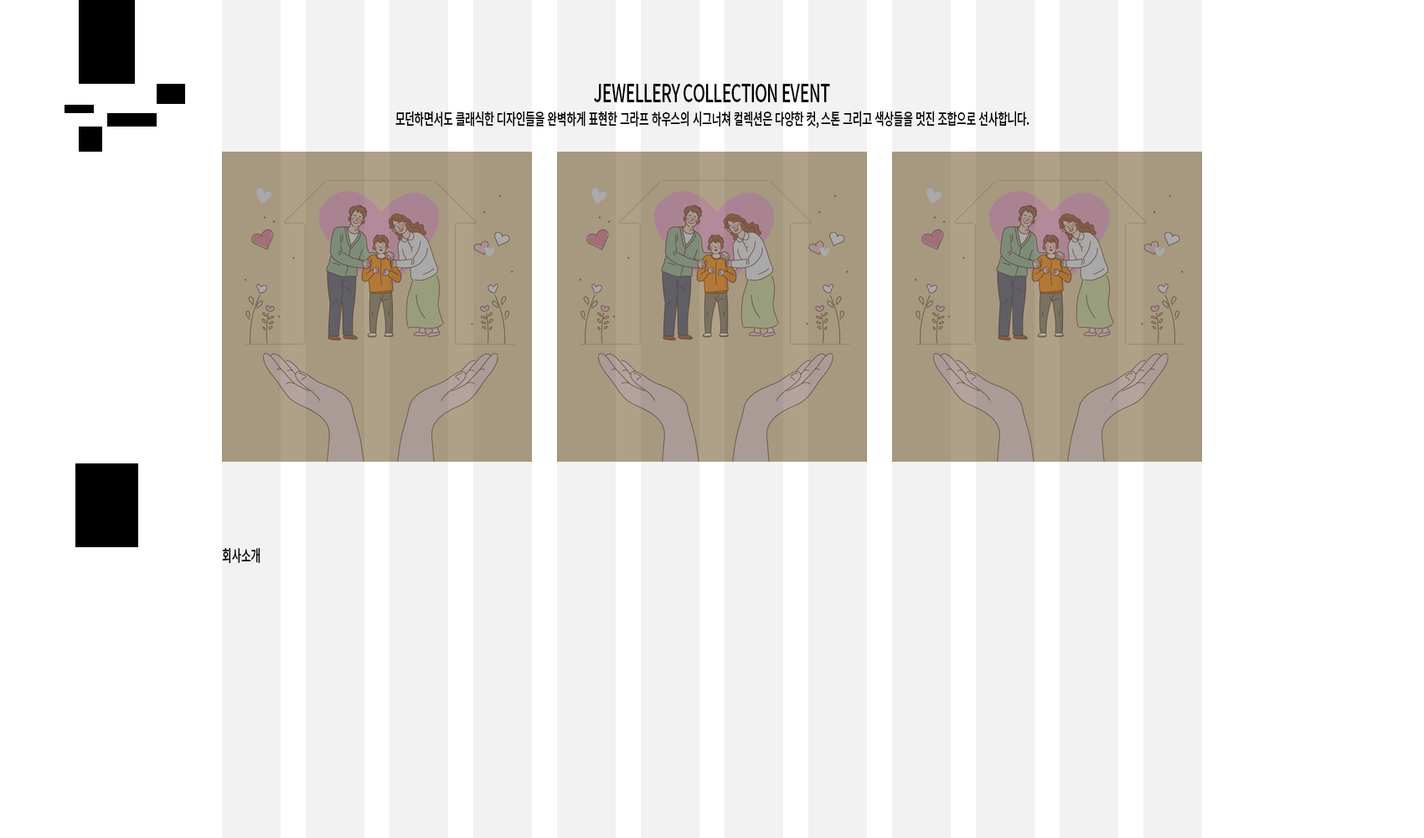
<style>
.page{position:relative;width:1424px;height:838px;background:#ffffff}
.page>*{position:absolute;margin:0}
.t1{font:24.1px "NotoSansKR-Medium";letter-spacing:-0.025em;color:#000000;scale:0.67 1}
.t2{font:16.1px "NotoSansKR-Medium";letter-spacing:-0.025em;color:#000000;scale:0.67 1}
</style>
<div class="page">
<p class="t1" style="left:594px;top:84px;width:236px;height:18px">JEWELLERY COLLECTION EVENT</p>
<p class="t2" style="left:395px;top:111px;width:634px;height:17px">모던하면서도 클래식한 디자인들을 완벽하게 표현한 그라프 하우스의 시그너쳐 컬렉션은 다양한 컷, 스톤 그리고 색상들을 멋진 조합으로 선사합니다.</p>
<p class="t2" style="left:222px;top:547px;width:38px;height:16px">회사소개</p>
</div>
